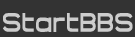
<style>
.page{position:relative;width:135px;height:37px;background:#333333}
.page>*{position:absolute;margin:0}
.t1{font:23.3px "GearusHeavy";color:#cdcdcd;scale:0.76 1}
</style>
<div class="page">
<p class="t1" style="left:3px;top:13px;width:130px;height:19px">StartBBS</p>
</div>
